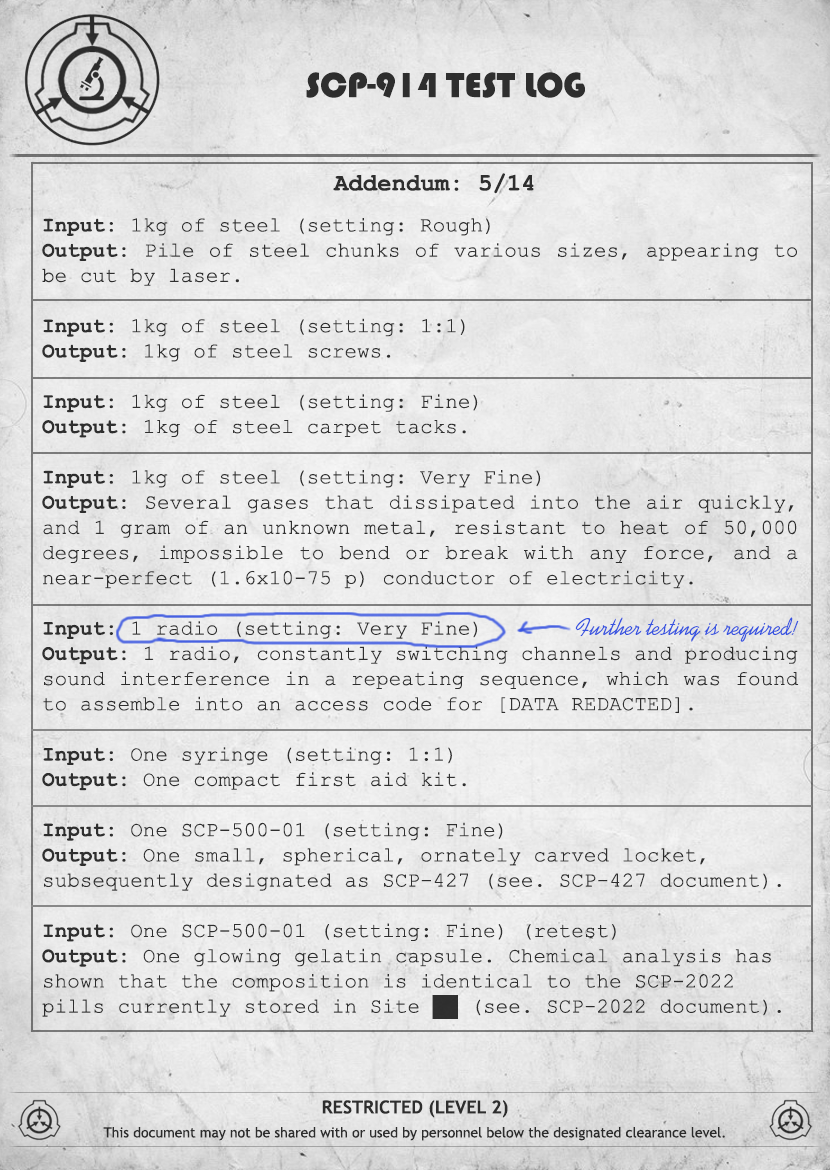
<style>
.page{position:relative;width:830px;height:1170px}
.page>*{position:absolute;margin:0}
.t1{font:36px "Bauhaus93";color:#333333;text-transform:uppercase}
.t2{font:24px "CourierNewPS-BoldMT";color:#333333}
.t3{font:21px "CourierNewPSMT";color:#333333}
.t4{font:21px "CourierNewPS-BoldMT";color:#333333}
.t5{font:24px "Kaufmann";color:#3753e0}
.t6{font:14px/24px "TrebuchetMS";color:#333333}
.t7{font:18px/24px "TrebuchetMS-Bold";color:#333333;text-transform:uppercase}
</style>
<div class="page">
<p class="t1" style="left:306px;top:72px;width:279px;height:26px">SCP-914 Test log</p>
<p class="t2" style="left:333px;top:173px;width:201px;height:21px">Addendum: 5/14</p>
<p class="t3" style="left:42px;top:218px;width:757px;height:801px;text-align:justify"><span class="t4">Input:</span> 1kg of steel (setting: Rough)<br><span class="t4">Output:</span> Pile of steel chunks of various sizes, appearing to be cut by laser.<br><br><span class="t4">Input:</span> 1kg of steel (setting: 1:1)<br><span class="t4">Output: </span>1kg of steel screws.<br><br><span class="t4">Input:</span> 1kg of steel (setting: Fine) <br><span class="t4">Output:</span> 1kg of steel carpet tacks.<br><br><span class="t4">Input:</span> 1kg of steel (setting: Very Fine)<br><span class="t4">Output:</span> Several gases that dissipated into the air quickly, and 1 gram of an unknown metal, resistant to heat of 50,000 degrees, impossible to bend or break with any force, and a near-perfect (1.6x10-75 p) conductor of electricity.<br><br><span class="t4">Input:</span> 1 radio (setting: Very Fine) <br><span class="t4">Output:</span> 1 radio, constantly switching channels and producing sound interference in a repeating sequence, which was found to assemble into an access code for [DATA REDACTED].<br><br><span class="t4">Input: </span>One syringe (setting: 1:1) <br><span class="t4">Output: </span>One compact first aid kit.<br><span class="t4"><br>Input: </span>One SCP-500-01 (setting: Fine) <br><span class="t4">Output: </span>One small, spherical, ornately carved locket, subsequently designated as SCP-427 (see. SCP-427 document).<br><span class="t4"><br>Input: </span>One SCP-500-01 (setting: Fine) (retest) <br><span class="t4">Output: </span>One glowing gelatin capsule. Chemical analysis has shown that the composition is identical to the SCP-2022 pills currently stored in Site ██ (see. SCP-2022 document).</p>
<p class="t5" style="left:575px;top:617px;width:224px;height:25px">Further testing is required!</p>
<p class="t6" style="left:103px;top:1100px;width:622px;height:41px;text-align:center"><span class="t7">Restricted (LEVEL 2)<br></span>This document may not be shared with or used by personnel below the designated clearance level.</p>
</div>
